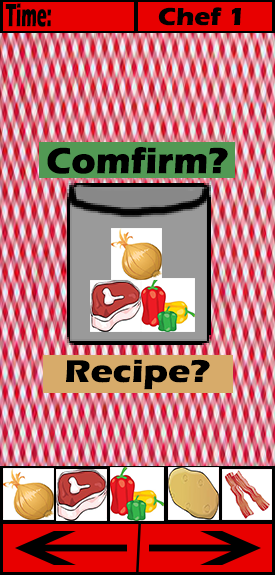
<style>
.page{position:relative;width:275px;height:575px}
.page>*{position:absolute;margin:0}
.t1{font:33.3px "ErasITC-Bold";color:#000000;scale:0.5 1}
.t2{font:25px "ErasITC-Bold";color:#000000;scale:1.08 1}
.t3{font:37.5px "ErasITC-Bold";color:#000000}
.t4{font:32.2px "ErasITC-Bold";color:#000000;scale:1.16 1}
</style>
<div class="page">
<p class="t1" style="left:5px;top:3px;width:46px;height:24px">Time:</p>
<p class="t2" style="left:158px;top:7px;width:83px;height:19px">Chef 1</p>
<p class="t3" style="left:47px;top:147px;width:181px;height:27px">Comfirm?</p>
<p class="t4" style="left:66px;top:359px;width:144px;height:31px">Recipe?</p>
</div>
